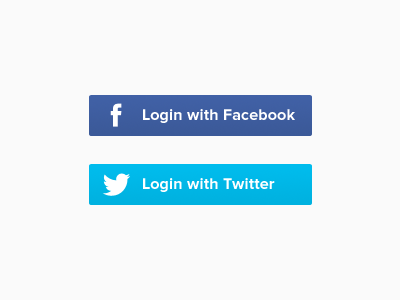
<style>
.page{position:relative;width:400px;height:300px;background:#fafafa}
.page>*{position:absolute;margin:0}
.t1{font:16px "ProximaNova-Bold";letter-spacing:0.01em;color:#ffffff}
</style>
<div class="page">
<p class="t1" style="left:143px;top:109px;width:152px;height:14px">Login with Facebook</p>
<p class="t1" style="left:143px;top:178px;width:132px;height:14px">Login with Twitter</p>
</div>
